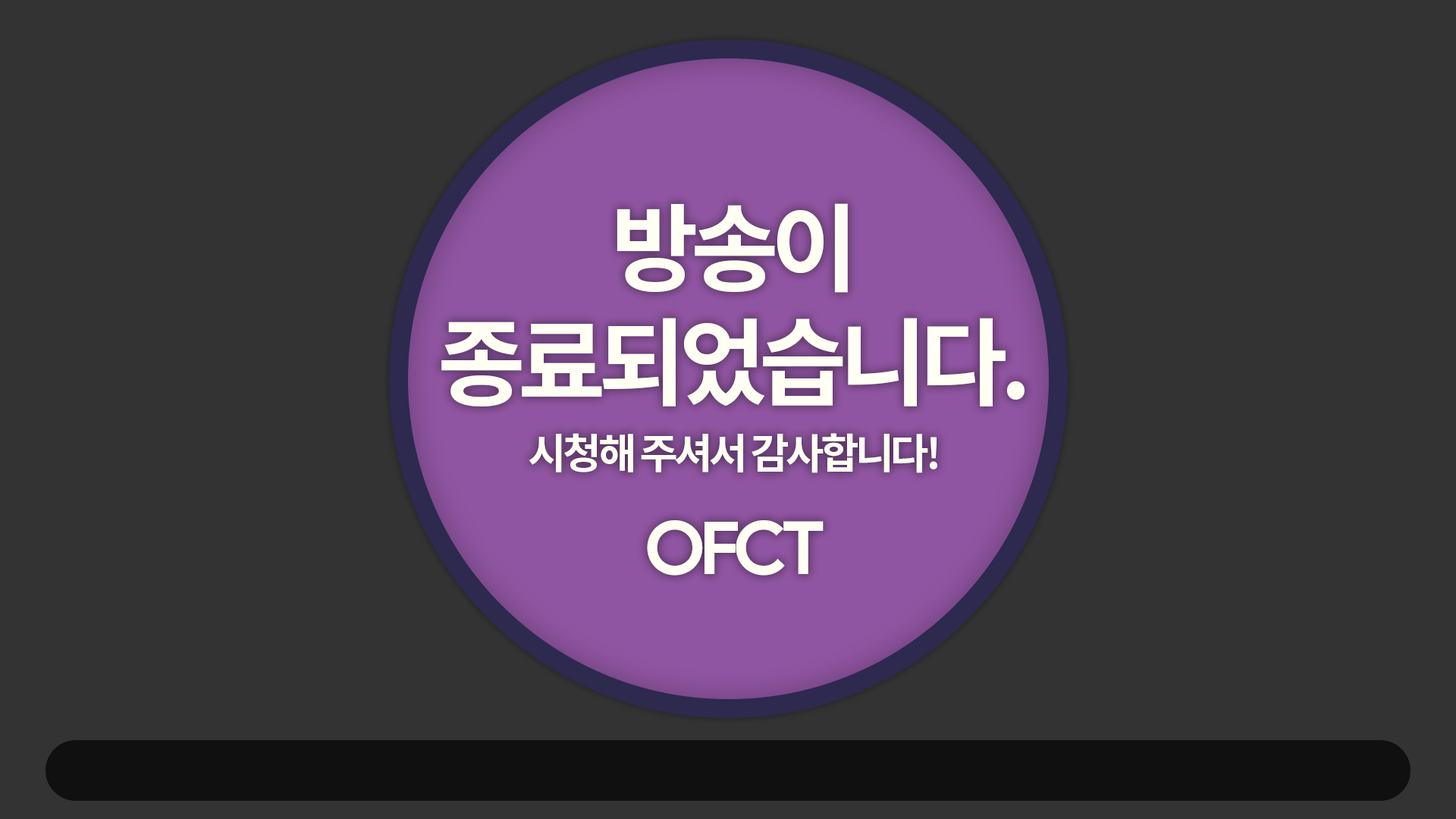
<style>
.page{position:relative;width:1456px;height:819px;background:#333333}
.page>*{position:absolute;margin:0}
.t1{font:41.7px/70.5px "NotoSansCJKkr-Bold";letter-spacing:-0.08em;color:#fffff3}
.t2{font:95.5px/112.2px "NotoSansCJKkr-Bold";letter-spacing:-0.08em;color:#fffff3}
.t3{font:95.5px "NotoSansCJKkr-Bold";letter-spacing:-0.08em;color:#fffff3}
.t4{font:73.6px/105.4px "ProductSans-Bold";letter-spacing:-0.08em;color:#fffff3}
</style>
<div class="page">
<p class="t1" style="left:441px;top:203px;width:583px;height:373px;text-align:center"><span class="t2">방송이<br></span><span class="t3">종료되었습 니다.<br></span>시청해 주셔서 감사합니다!<br><span class="t4">OFCT</span></p>
</div>
